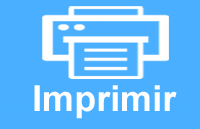
<style>
.page{position:relative;width:200px;height:129px;background:#4aafff}
.page>*{position:absolute;margin:0}
.t1{font:36px "Arial-BoldMT";color:#ffffff}
</style>
<div class="page">
<p class="t1" style="left:34px;top:85px;width:143px;height:34px">Imprimir</p>
</div>
